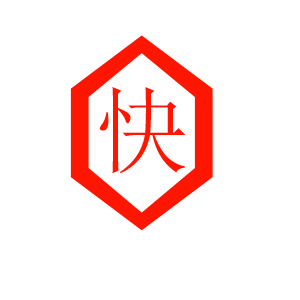
<style>
.page{position:relative;width:300px;height:300px;background:#ffffff}
.page>*{position:absolute;margin:0}
.t1{font:93.7px "SimSun";color:#ff1600}
</style>
<div class="page">
<p class="t1" style="left:99px;top:87px;width:87px;height:87px">快</p>
</div>
